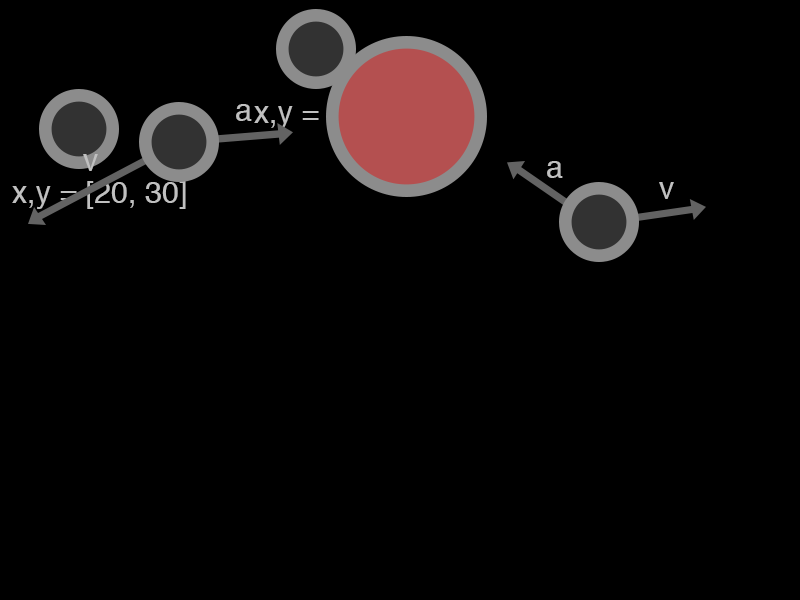
<style>
.page{position:relative;width:800px;height:600px;background:#000000}
.page>*{position:absolute;margin:0}
.t1{font:12px "Helvetica"}
.t2{font:12px "Helvetica";color:#c0c0c0}
</style>
<div class="page">
<p class="t1" style="left:254px;top:101px;width:174px;height:28px">x,y = [50, 10]</p>
<p class="t2" style="left:236px;top:104px;width:16px;height:17px">a</p>
<p class="t2" style="left:83px;top:154px;width:15px;height:17px">v</p>
<p class="t2" style="left:547px;top:161px;width:16px;height:17px">a</p>
<p class="t2" style="left:12px;top:181px;width:174px;height:28px">x,y = [20, 30]</p>
<p class="t2" style="left:659px;top:182px;width:15px;height:17px">v</p>
</div>
